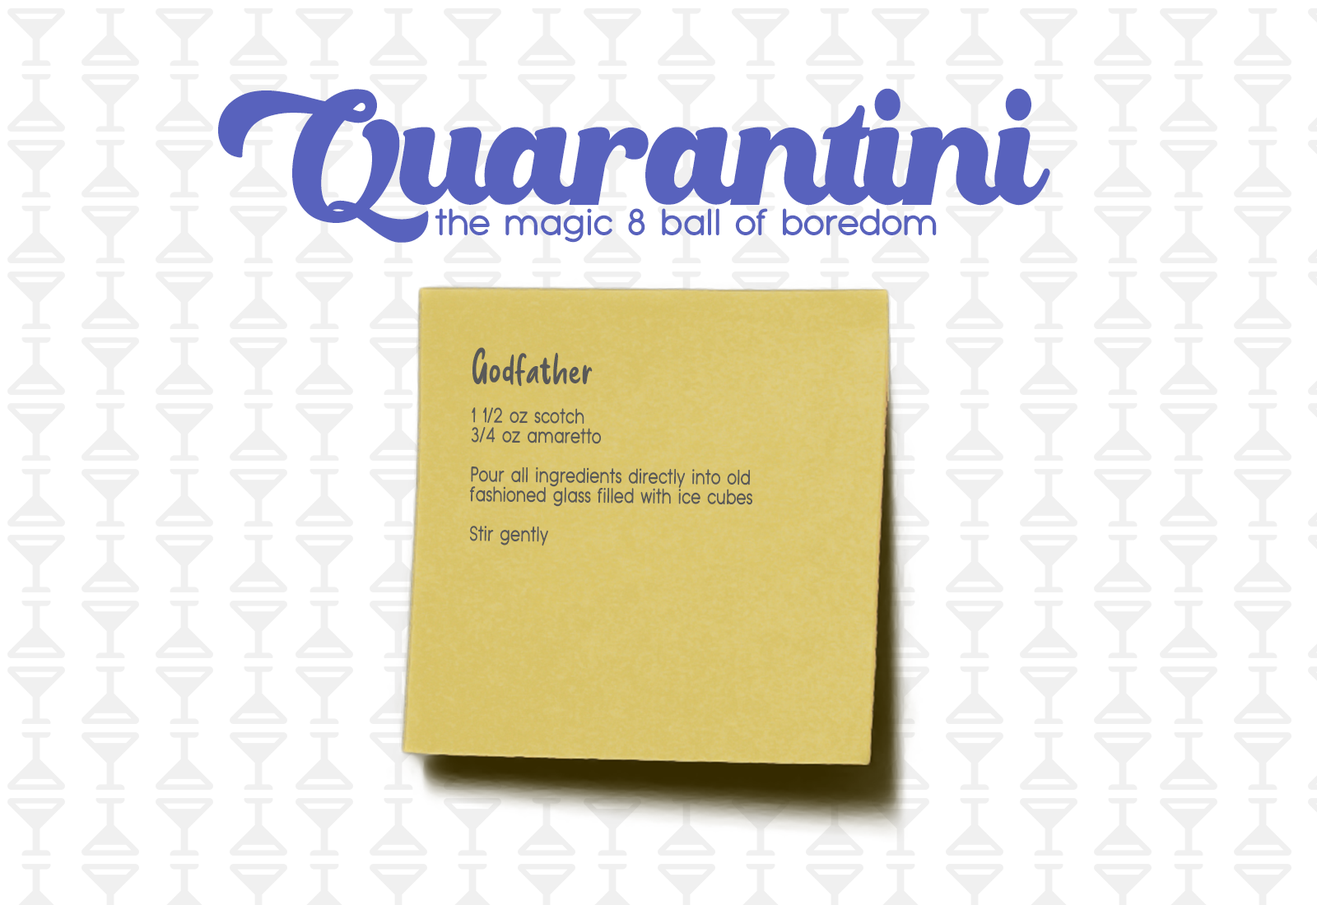
<style>
.page{position:relative;width:1317px;height:905px;background:#ffffff}
.page>*{position:absolute;margin:0}
.t1{font:154.3px "Oaklash";letter-spacing:-0.05em;color:#5862bd;scale:0.8 1}
.t2{font:36.2px "TypoGroteskRounded";color:#5862bd}
.t3{font:20.6px "TypoGroteskRounded";letter-spacing:0.01em;color:#585858;scale:0.8 1}
.t4{font:49.4px "sweetpurple";letter-spacing:0.01em;color:#585858;scale:0.8 1}
</style>
<div class="page">
<p class="t1" style="left:218px;top:88px;width:832px;height:155px">Quarantini</p>
<p class="t2" style="left:435px;top:208px;width:502px;height:35px">the magic 8 ball of boredom</p>
<p class="t3" style="left:470px;top:347px;width:282px;height:200px;rotate:1deg"><span class="t4">Godfather<br></span><br>1 1/2 oz scotch<br>3/4 oz amaretto<br><br>Pour all ingredients directly into old fashioned glass filled with ice cubes<br><br>Stir gently</p>
</div>
